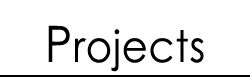
<style>
.page{position:relative;width:250px;height:84px;background:#ffffff}
.page>*{position:absolute;margin:0}
.t1{font:43.6px "CenturyGothic";letter-spacing:0.02em;color:#000000;scale:0.92 1}
.t2{font:50.1px "CenturyGothic";letter-spacing:0.02em;color:#000000;scale:0.92 1}
</style>
<div class="page">
<p class="t1" style="left:48px;top:25px;width:156px;height:47px"><span class="t2">P</span>rojects</p>
</div>
